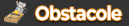
<style>
.page{position:relative;width:129px;height:26px;background:#333333}
.page>*{position:absolute;margin:0}
.t1{font:19.4px "Montserrat-Bold";letter-spacing:-0.04em;color:#ffffff;scale:0.9 1}
</style>
<div class="page">
<p class="t1" style="left:35px;top:5px;width:87px;height:16px">Obstacole</p>
</div>
